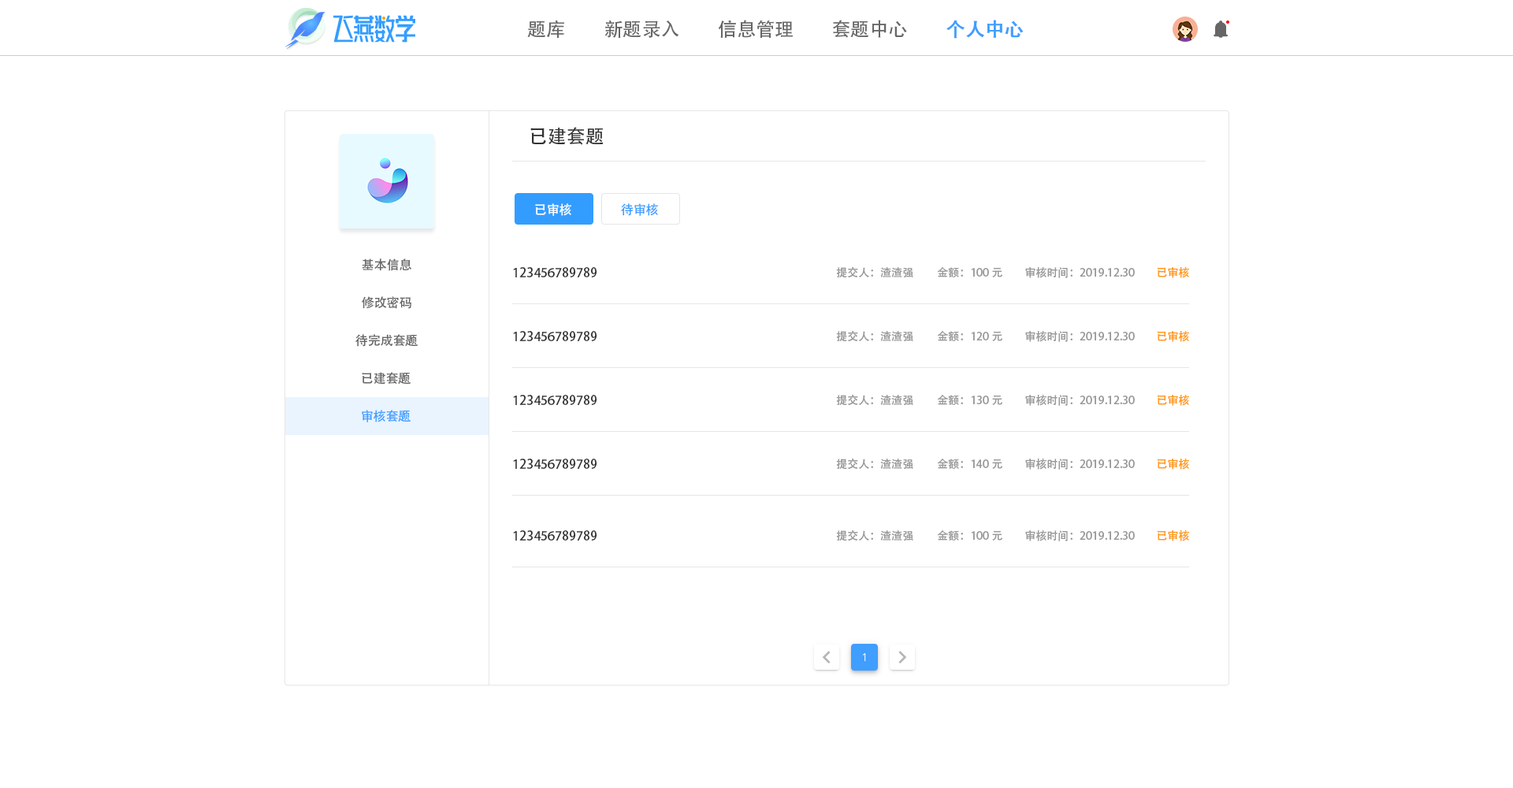
<style>
.page{position:relative;width:1513px;height:788px;background:#ffffff}
.page>*{position:absolute;margin:0}
.t1{font:18.9px "AdobeHeitiStd-Regular";color:#666666}
.t2{font:18.9px "AdobeHeitiStd-Regular";color:#409eff;font-weight:bold}
.t3{font:18.9px "AdobeHeitiStd-Regular";color:#333333}
.t4{font:12.6px "AdobeHeitiStd-Regular";color:#ffffff}
.t5{font:12.6px "AdobeHeitiStd-Regular";color:#409eff}
.t6{font:12.6px "AdobeHeitiStd-Regular";color:#666666}
.t7{font:12.6px "AdobeHeitiStd-Regular";color:#333333}
.t8{font:11px "AdobeHeitiStd-Regular";color:#999999}
.t9{font:11px "AdobeHeitiStd-Regular";color:#ff9814}
</style>
<div class="page">
<p class="t1" style="left:527px;top:20px;width:37px;height:18px">题库</p>
<p class="t1" style="left:604px;top:20px;width:75px;height:18px">新题录入</p>
<p class="t1" style="left:718px;top:20px;width:75px;height:19px">信息管理</p>
<p class="t1" style="left:833px;top:20px;width:74px;height:18px">套题中心</p>
<p class="t2" style="left:946px;top:20px;width:78px;height:19px">个人中心</p>
<p class="t3" style="left:530px;top:127px;width:74px;height:18px">已建套题</p>
<p class="t4" style="left:535px;top:203px;width:36px;height:13px">已审核</p>
<p class="t5" style="left:621px;top:203px;width:37px;height:13px">待审核</p>
<p class="t6" style="left:362px;top:258px;width:50px;height:13px">基本信息</p>
<p class="t7" style="left:513px;top:267px;width:84px;height:10px">123456789789</p>
<p class="t8" style="left:836px;top:266px;width:77px;height:12px">提交人：渣渣强</p>
<p class="t8" style="left:937px;top:267px;width:65px;height:10px">金额：100元</p>
<p class="t8" style="left:1025px;top:267px;width:110px;height:11px">审核时间：2019.12.30</p>
<p class="t9" style="left:1157px;top:267px;width:32px;height:11px">已审核</p>
<p class="t6" style="left:362px;top:296px;width:49px;height:13px">修改密码</p>
<p class="t6" style="left:355px;top:334px;width:63px;height:13px">待完成套题</p>
<p class="t7" style="left:513px;top:331px;width:84px;height:10px">123456789789</p>
<p class="t8" style="left:836px;top:330px;width:77px;height:12px">提交人：渣渣强</p>
<p class="t8" style="left:937px;top:331px;width:65px;height:10px">金额：120元</p>
<p class="t8" style="left:1025px;top:331px;width:110px;height:11px">审核时间：2019.12.30</p>
<p class="t9" style="left:1157px;top:331px;width:32px;height:11px">已审核</p>
<p class="t6" style="left:362px;top:372px;width:49px;height:13px">已建套题</p>
<p class="t7" style="left:513px;top:395px;width:84px;height:10px">123456789789</p>
<p class="t8" style="left:836px;top:394px;width:77px;height:12px">提交人：渣渣强</p>
<p class="t8" style="left:937px;top:395px;width:65px;height:10px">金额：130元</p>
<p class="t8" style="left:1025px;top:395px;width:110px;height:11px">审核时间：2019.12.30</p>
<p class="t9" style="left:1157px;top:395px;width:32px;height:11px">已审核</p>
<p class="t5" style="left:362px;top:410px;width:49px;height:12px">审核套题</p>
<p class="t7" style="left:513px;top:459px;width:84px;height:10px">123456789789</p>
<p class="t8" style="left:836px;top:458px;width:77px;height:12px">提交人：渣渣强</p>
<p class="t8" style="left:937px;top:459px;width:65px;height:10px">金额：140元</p>
<p class="t8" style="left:1025px;top:459px;width:110px;height:11px">审核时间：2019.12.30</p>
<p class="t9" style="left:1157px;top:459px;width:32px;height:11px">已审核</p>
<p class="t7" style="left:513px;top:530px;width:84px;height:11px">123456789789</p>
<p class="t8" style="left:836px;top:530px;width:77px;height:11px">提交人：渣渣强</p>
<p class="t8" style="left:937px;top:530px;width:65px;height:11px">金额：100元</p>
<p class="t8" style="left:1025px;top:530px;width:110px;height:11px">审核时间：2019.12.30</p>
<p class="t9" style="left:1157px;top:530px;width:32px;height:11px">已审核</p>
</div>
